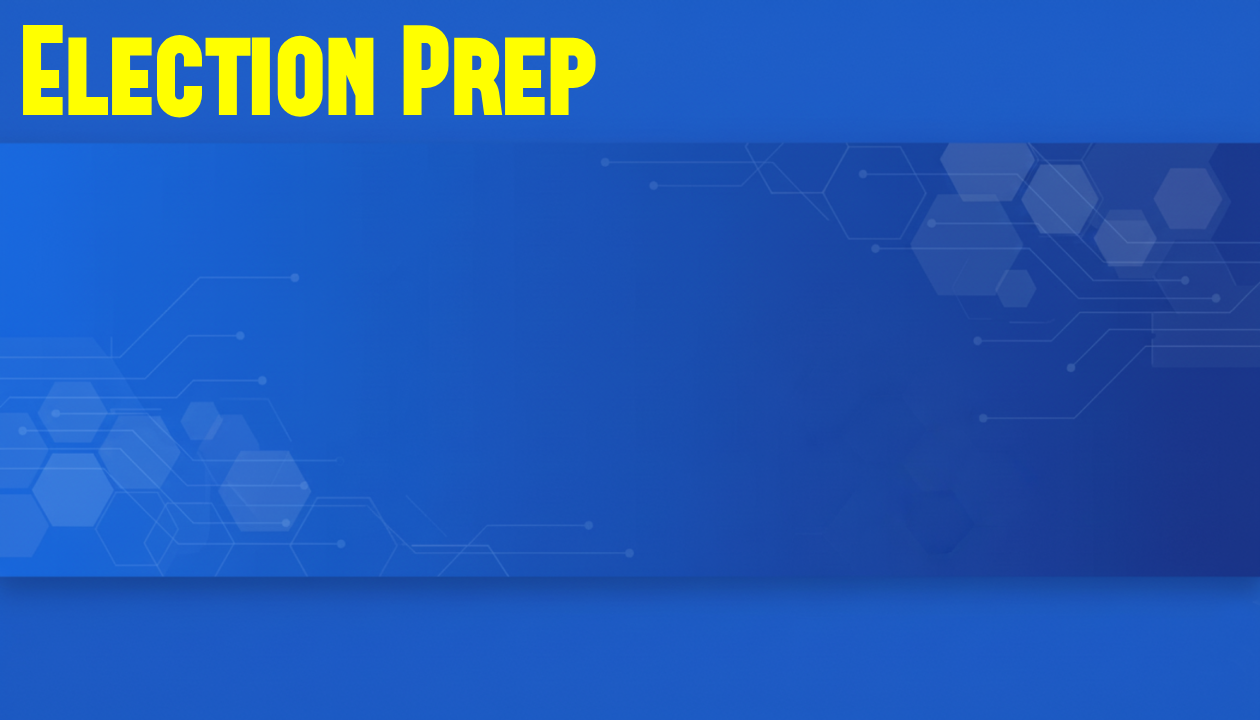
<style>
.page{position:relative;width:1260px;height:720px}
.page>*{position:absolute;margin:0}
.t1{font:128.4px "FORQUE";color:#ffff00}
</style>
<div class="page">
<p class="t1" style="left:23px;top:25px;width:573px;height:93px">Election Prep</p>
</div>
